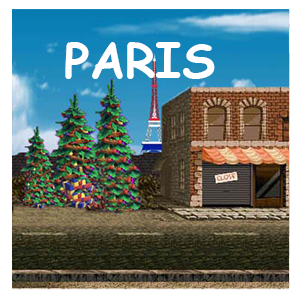
<style>
.page{position:relative;width:300px;height:300px}
.page>*{position:absolute;margin:0}
.t1{font:48px "ComicSansMS-Bold";color:#ffffff}
</style>
<div class="page">
<p class="t1" style="left:65px;top:42px;width:150px;height:37px">PARIS</p>
</div>
